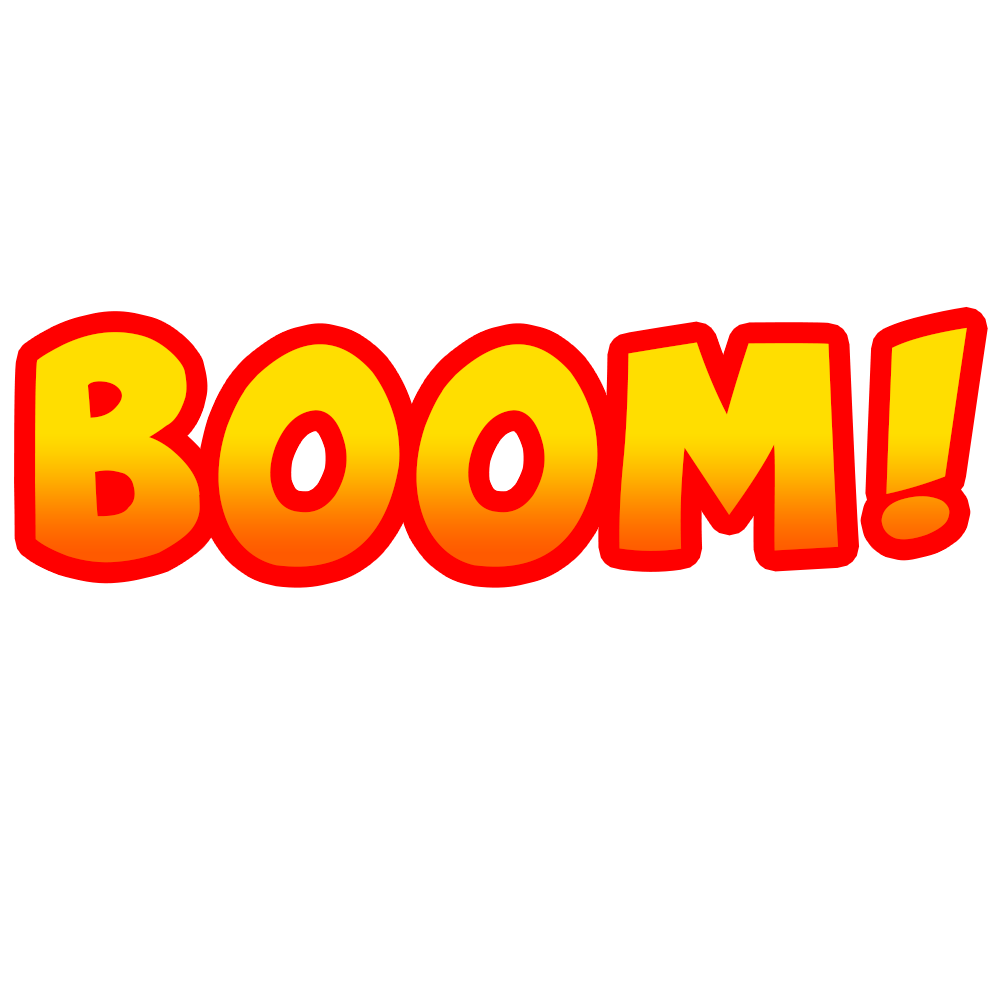
<style>
.page{position:relative;width:1000px;height:1000px;background:#ffffff}
.page>*{position:absolute;margin:0}
.t1{font:172.7px "Splatch";scale:1.19 1}
</style>
<div class="page">
<p class="t1" style="left:35px;top:327px;width:932px;height:240px">BOOM!</p>
</div>
